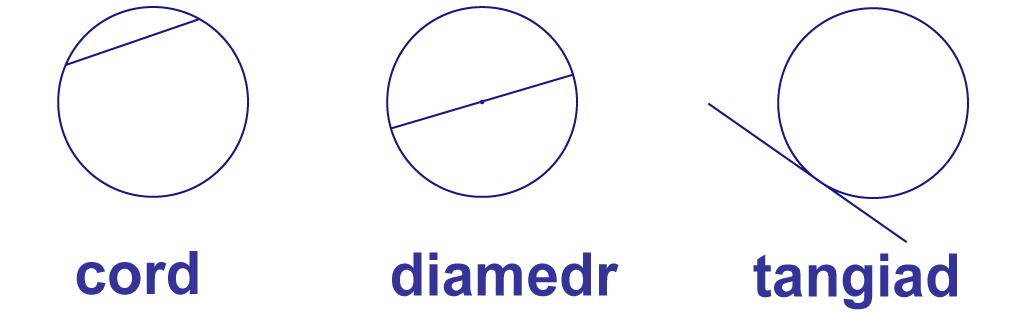
<style>
.page{position:relative;width:1024px;height:312px;background:#ffffff}
.page>*{position:absolute;margin:0}
.t1{font:60px "Arial-BoldMT";color:#333399}
</style>
<div class="page">
<p class="t1" style="left:76px;top:251px;width:122px;height:44px">cord</p>
<p class="t1" style="left:392px;top:252px;width:227px;height:45px">diamedr</p>
<p class="t1" style="left:753px;top:253px;width:204px;height:57px">tangiad</p>
</div>
